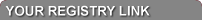
<style>
.page{position:relative;width:202px;height:20px;background:#858585}
.page>*{position:absolute;margin:0}
.t1{font:13.3px "Arial-BoldMT";color:#ffffff}
</style>
<div class="page">
<p class="t1" style="left:5px;top:5px;width:145px;height:11px">YOUR REGISTRY LINK</p>
</div>
